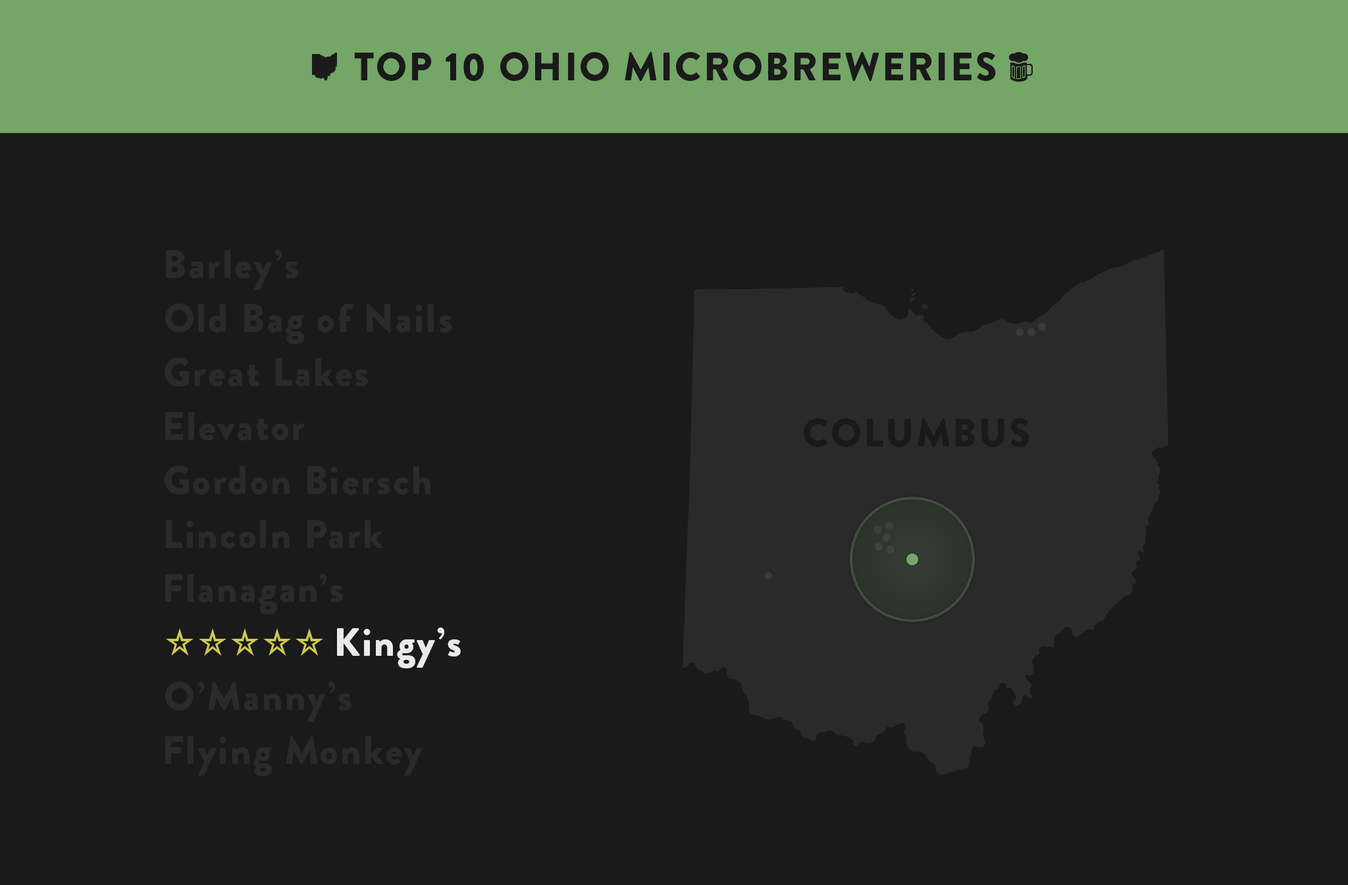
<style>
.page{position:relative;width:1348px;height:885px;background:#1a1a1a}
.page>*{position:absolute;margin:0}
.t1{font:39.4px "BrandonGrotesque-Black";letter-spacing:0.05em;color:#1a1a1a}
.t2{font:39.5px "BrandonGrotesque-Black";letter-spacing:0.05em;color:#2a2a2a}
.t3{font:39.5px "BrandonGrotesque-Black";letter-spacing:0.05em;color:#1a1a1a}
.t4{font:39.5px "BrandonGrotesque-Black";letter-spacing:0.05em;color:#eaeaea}
</style>
<div class="page">
<p class="t1" style="left:354px;top:52px;width:642px;height:29px">TOP 10 OHIO MICROBREWERIES</p>
<p class="t2" style="left:166px;top:249px;width:132px;height:41px">Barley’s</p>
<p class="t2" style="left:165px;top:303px;width:287px;height:41px">Old Bag of Nails</p>
<p class="t2" style="left:165px;top:357px;width:203px;height:29px">Great Lakes</p>
<p class="t2" style="left:165px;top:412px;width:140px;height:28px">Elevator</p>
<p class="t3" style="left:804px;top:418px;width:225px;height:29px">COLUMBUS</p>
<p class="t2" style="left:165px;top:465px;width:265px;height:29px">Gordon Biersch</p>
<p class="t2" style="left:166px;top:520px;width:217px;height:28px">Lincoln Park</p>
<p class="t2" style="left:165px;top:573px;width:178px;height:41px">Flanagan’s</p>
<p class="t4" style="left:337px;top:627px;width:124px;height:41px">Kingy’s</p>
<p class="t2" style="left:165px;top:681px;width:186px;height:40px">O’Manny’s</p>
<p class="t2" style="left:165px;top:735px;width:258px;height:41px">Flying Monkey</p>
</div>
